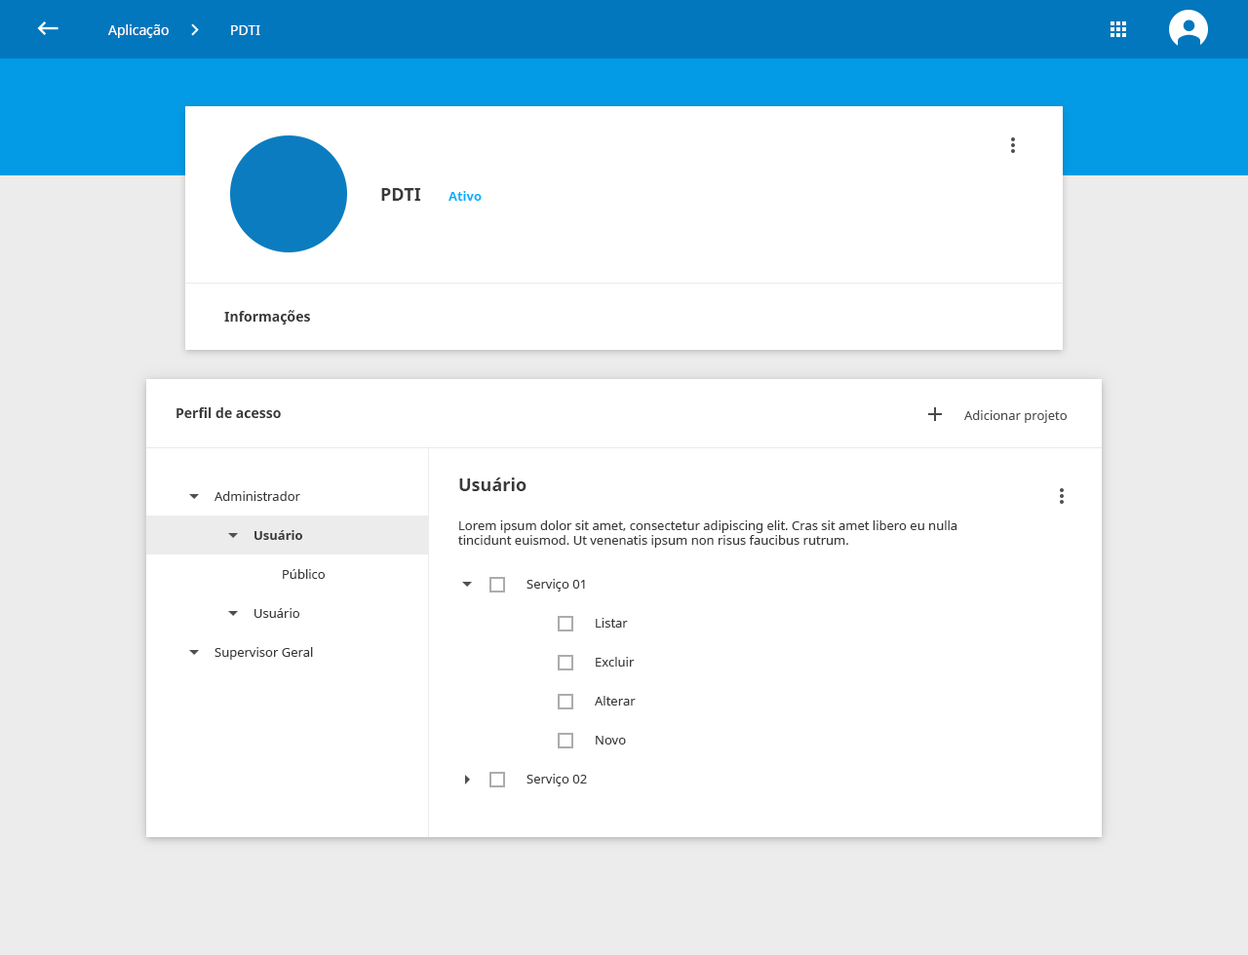
<style>
.page{position:relative;width:1248px;height:955px;background:#ffffff}
.page>*{position:absolute;margin:0}
.t1{font:13.6px "NotoSans";color:#ffffff}
.t2{font:17.5px "NotoSans-Bold";color:#393939}
.t3{font:12.7px "NotoSans-Bold";color:#00b0ff}
.t4{font:13.6px "NotoSans-Bold";color:#393939}
.t5{font:12.7px "NotoSans";color:#4a4a4a}
.t6{font:12.7px "NotoSans";color:#393939}
.t7{font:12.7px "NotoSans-Bold";color:#393939}
</style>
<div class="page">
<p class="t1" style="left:108px;top:24px;width:61px;height:14px">Aplicação</p>
<p class="t1" style="left:231px;top:25px;width:29px;height:10px">PDTI</p>
<p class="t2" style="left:381px;top:188px;width:40px;height:13px">PDTI</p>
<p class="t3" style="left:448px;top:191px;width:34px;height:10px">Ativo</p>
<p class="t4" style="left:224px;top:310px;width:86px;height:15px">Informações</p>
<p class="t4" style="left:176px;top:408px;width:105px;height:10px">Perfil de acesso</p>
<p class="t5" style="left:964px;top:410px;width:103px;height:13px">Adicionar projeto</p>
<p class="t2" style="left:459px;top:478px;width:67px;height:13px">Usuário</p>
<p class="t6" style="left:214px;top:491px;width:86px;height:10px">Administrador</p>
<p class="t6" style="left:458px;top:521px;width:499px;height:27px">Lorem ipsum dolor sit amet, consectetur adipiscing elit. Cras sit amet libero eu nulla tincidunt euismod. Ut venenatis ipsum non risus faucibus rutrum.</p>
<p class="t7" style="left:254px;top:530px;width:49px;height:10px">Usuário</p>
<p class="t6" style="left:283px;top:569px;width:42px;height:10px">Público</p>
<p class="t6" style="left:526px;top:579px;width:59px;height:13px">Serviço 01</p>
<p class="t6" style="left:254px;top:608px;width:45px;height:10px">Usuário</p>
<p class="t6" style="left:596px;top:618px;width:32px;height:10px">Listar</p>
<p class="t6" style="left:214px;top:647px;width:99px;height:13px">Supervisor Geral</p>
<p class="t6" style="left:596px;top:657px;width:39px;height:10px">Excluir</p>
<p class="t6" style="left:595px;top:696px;width:41px;height:10px">Alterar</p>
<p class="t6" style="left:596px;top:736px;width:30px;height:9px">Novo</p>
<p class="t6" style="left:526px;top:774px;width:61px;height:13px">Serviço 02</p>
</div>
